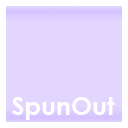
<style>
.page{position:relative;width:128px;height:128px;background:#e2d6ff}
.page>*{position:absolute;margin:0}
.t1{font:25px "CenturyGothic-Bold";color:#ffffff}
</style>
<div class="page">
<p class="t1" style="left:12px;top:97px;width:103px;height:23px">SpunOut</p>
</div>
